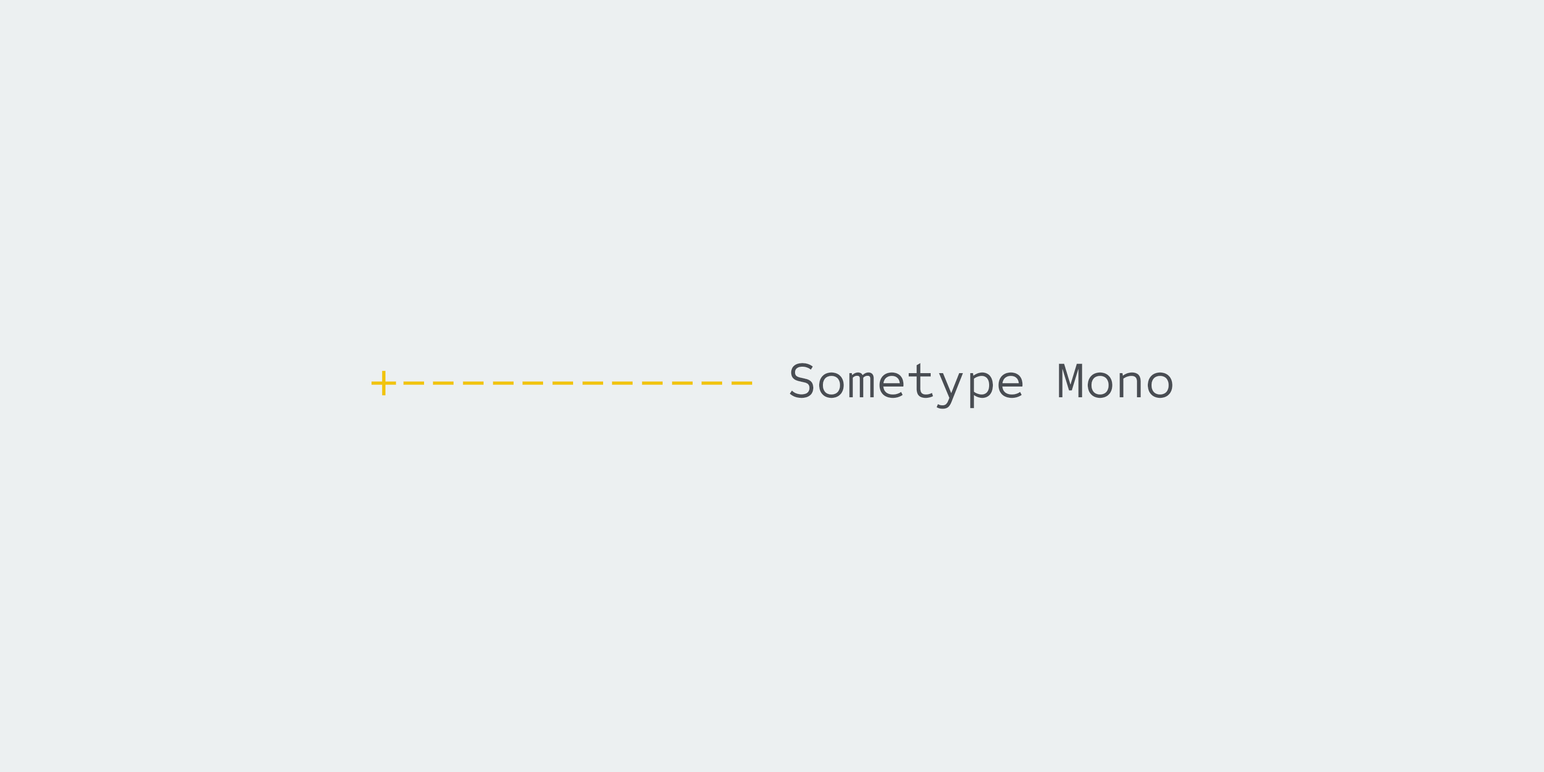
<style>
.page{position:relative;width:1544px;height:772px;background:#ecf0f1}
.page>*{position:absolute;margin:0}
.t1{font:51.5px "SometypeMono-Regular";color:#f1c40f}
.t2{font:51.5px "SometypeMono-Regular";color:#494d53}
</style>
<div class="page">
<p class="t1" style="left:372px;top:363px;width:801px;height:46px">+------------<span class="t2"> Sometype Mono</span></p>
</div>
